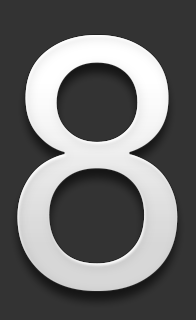
<style>
.page{position:relative;width:196px;height:320px;background:#333333}
.page>*{position:absolute;margin:0}
.t1{font:344.1px "Prelude-Medium";color:#e9e9e9}
</style>
<div class="page">
<p class="t1" style="left:17px;top:35px;width:161px;height:256px">8</p>
<p class="t1" style="left:17px;top:35px;width:161px;height:256px">8</p>
</div>
